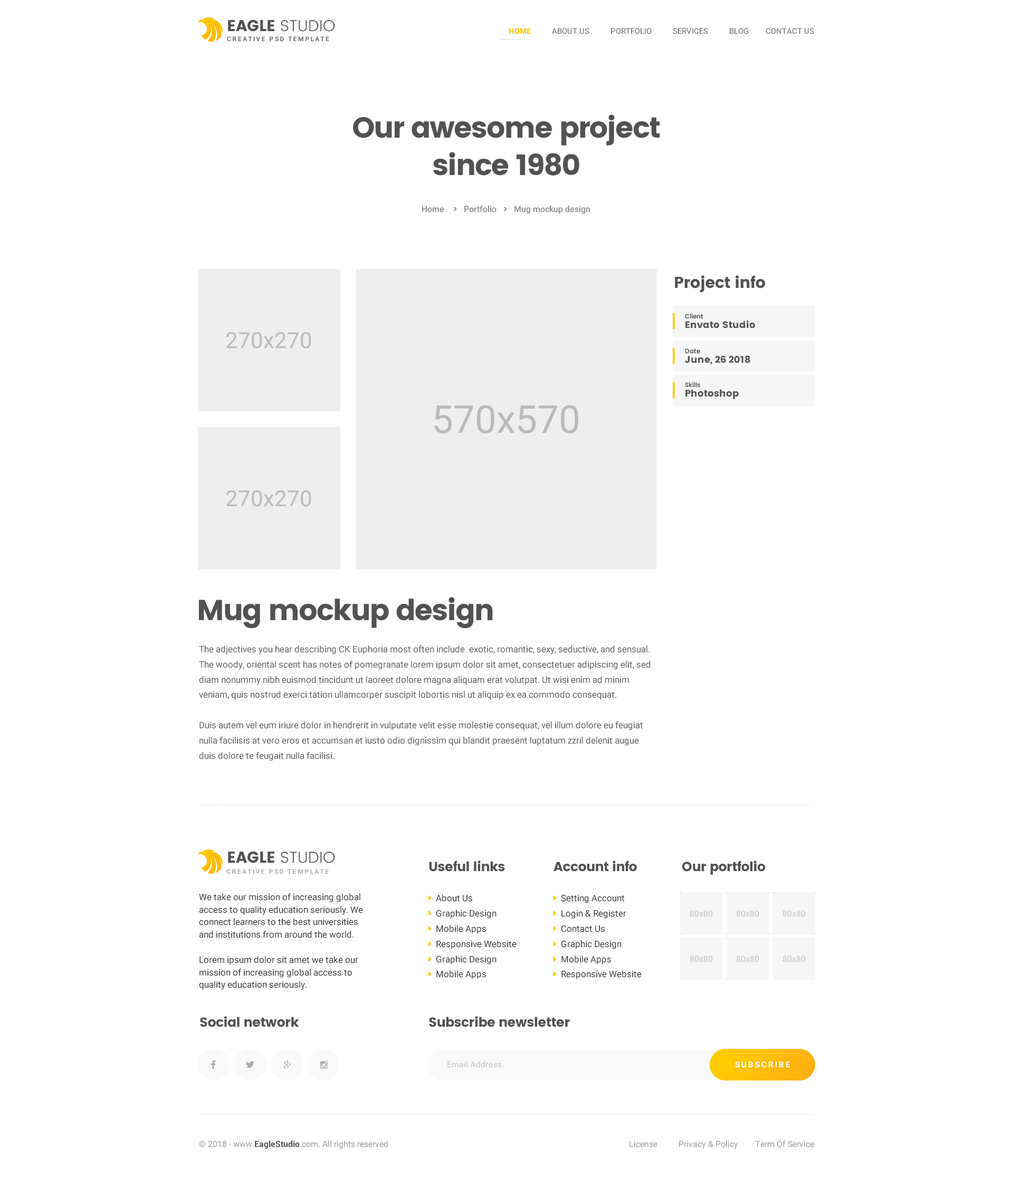
<style>
.page{position:relative;width:1013px;height:1177px;background:#ffffff}
.page>*{position:absolute;margin:0}
.t1{font:15.8px "Poppins-Light";color:#515253}
.t2{font:15.8px "Poppins";color:#515253}
.t3{font:7.9px "Roboto-Medium";color:#878787}
.t4{font:7.9px "Roboto-Black";color:#ffca00}
.t5{font:6.3px "Roboto-Bold";letter-spacing:0.2em;color:#636465}
.t6{font:29px/37.7px "Poppins";letter-spacing:-0.04em;color:#515252}
.t7{font:8.4px "Roboto-Medium";color:#878787}
.t8{font:8.4px "Poppins-SemiBold";color:#878787}
.t9{font:15.8px "Poppins";letter-spacing:-0.02em;color:#515252}
.t10{font:9.5px/9.5px "Poppins";color:#515252}
.t11{font:6.3px/6.3px "Poppins-SemiBold";color:#515252}
.t12{font:29px "Poppins";letter-spacing:-0.04em;color:#515252}
.t13{font:9px/15.2px "Roboto-Regular";color:#595959}
.t14{font:5.3px "Poppins-Light";letter-spacing:0.076em}
.t15{font:15.8px "Poppins-Light";color:#515252}
.t16{font:15.8px "Poppins";color:#515252}
.t17{font:6.3px "Roboto-Bold";letter-spacing:0.2em;color:#aaaaaa}
.t18{font:13.2px "Poppins";letter-spacing:-0.02em;color:#515252}
.t19{font:9px/12.6px "Roboto-Regular";color:#333333}
.t20{font:8.4px "Roboto-Medium";color:#cccccc}
.t21{font:7.9px "Roboto-Bold";letter-spacing:0.2em;color:#ffffff}
.t22{font:8.4px "Roboto-Regular";color:#999999}
.t23{font:8.4px "Roboto-Bold";color:#515252}
</style>
<div class="page">
<p class="t1" style="left:228px;top:20px;width:107px;height:12px"><span class="t2">EAGLE</span> STUDIO</p>
<p class="t3" style="left:509px;top:28px;width:305px;height:6px"><span class="t4">HOME </span>         ABOUT US          PORTFOLIO          SERVICES          BLOG        CONTACT US</p>
<p class="t5" style="left:227px;top:36px;width:102px;height:5px">CREATIVE PSD TEMPLATE</p>
<p class="t6" style="left:353px;top:114px;width:307px;height:62px;text-align:center">Our awesome project since 1980</p>
<p class="t7" style="left:422px;top:205px;width:168px;height:9px">Home    <span class="t8">&gt;</span>   Portfolio   <span class="t8">&gt;</span>   Mug mockup design</p>
<p class="t9" style="left:675px;top:275px;width:90px;height:17px">Project info</p>
<p class="t10" style="left:685px;top:313px;width:70px;height:16px"><span class="t11">Client<br></span>Envato Studio</p>
<p class="t10" style="left:685px;top:349px;width:65px;height:16px"><span class="t11">Date<br></span>June, 26 2018</p>
<p class="t10" style="left:685px;top:382px;width:53px;height:17px"><span class="t11">Skills<br></span>Photoshop</p>
<p class="t12" style="left:199px;top:597px;width:294px;height:32px">Mug mockup design</p>
<p class="t13" style="left:199px;top:646px;width:451px;height:115px">The adjectives you hear describing CK Euphoria most often include  exotic, romantic, sexy, seductive, and sensual. The woody, oriental scent has notes of pomegranate lorem ipsum dolor sit amet, consectetuer adipiscing elit, sed diam nonummy nibh euismod tincidunt ut laoreet dolore magna aliquam erat volutpat. Ut wisi enim ad minim veniam, quis nostrud exerci tation ullamcorper suscipit lobortis nisl ut aliquip ex ea commodo consequat. <br><br>Duis autem vel eum iriure dolor in hendrerit in vulputate velit esse molestie consequat, vel illum dolore eu feugiat nulla facilisis at vero eros et accumsan et iusto odio dignissim qui blandit praesent luptatum zzril delenit augue duis dolore te feugait nulla facilisi.</p>
<p class="t14" style="left:199px;top:805px;width:612px;height:0px">----------------------------------------------------------------------------------------------------------------------------------------------------------------------------</p>
<p class="t15" style="left:228px;top:851px;width:107px;height:13px"><span class="t16">EAGLE</span> STUDIO</p>
<p class="t17" style="left:226px;top:869px;width:103px;height:5px">CREATIVE PSD TEMPLATE</p>
<p class="t18" style="left:429px;top:861px;width:76px;height:11px">Useful links</p>
<p class="t18" style="left:553px;top:861px;width:84px;height:11px">Account info</p>
<p class="t18" style="left:682px;top:861px;width:83px;height:14px">Our portfolio</p>
<p class="t19" style="left:199px;top:894px;width:164px;height:96px">We take our mission of increasing global access to quality education seriously. We connect learners to the best universities and institutions from around the world.<br><br>Lorem ipsum dolor sit amet we take our mission of increasing global access to quality education seriously.</p>
<p class="t18" style="left:200px;top:1016px;width:99px;height:12px">Social network</p>
<p class="t18" style="left:429px;top:1016px;width:141px;height:12px">Subscribe newsletter</p>
<p class="t20" style="left:447px;top:1061px;width:57px;height:7px">Email Address.</p>
<p class="t21" style="left:735px;top:1062px;width:55px;height:6px">SUBSCRIBE</p>
<p class="t14" style="left:199px;top:1115px;width:612px;height:0px">----------------------------------------------------------------------------------------------------------------------------------------------------------------------------</p>
<p class="t22" style="left:199px;top:1141px;width:189px;height:8px">© 2018 - www.<span class="t23">EagleStudio</span>.com. All rights reserved</p>
<p class="t22" style="left:629px;top:1140px;width:185px;height:9px">License          Privacy &amp; Policy        Term Of Service</p>
</div>
